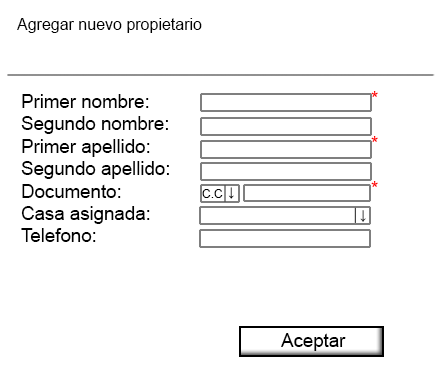
<style>
.page{position:relative;width:444px;height:378px;background:#ffffff}
.page>*{position:absolute;margin:0}
.t1{font:12px "ArialMT";color:#000000}
.t2{font:18.7px "ArialMT";color:#000000}
.t3{font:18.7px "ArialMT";color:#ff0000}
.t4{font:13.3px "ArialMT";color:#000000}
.t5{font:13.3px "ArialMT"}
</style>
<div class="page">
<p class="t1" style="left:17px;top:18px;width:185px;height:15px">Agregar nuevo propietario</p>
<p class="t2" style="left:21px;top:94px;width:148px;height:148px">Primer nombre:<br>Segundo nombre:<br>Primer apellido:<br>Segundo apellido:<br>Documento:<br>Casa asignada:<br>Telefono:</p>
<p class="t3" style="left:371px;top:91px;width:7px;height:96px">*<br><br>*<br><br>*</p>
<p class="t1" style="left:202px;top:189px;width:21px;height:9px">C.C</p>
<p class="t4" style="left:228px;top:187px;width:6px;height:12px">↓</p>
<p class="t5" style="left:360px;top:210px;width:6px;height:12px">↓</p>
<p class="t2" style="left:281px;top:333px;width:65px;height:18px">Aceptar</p>
</div>
